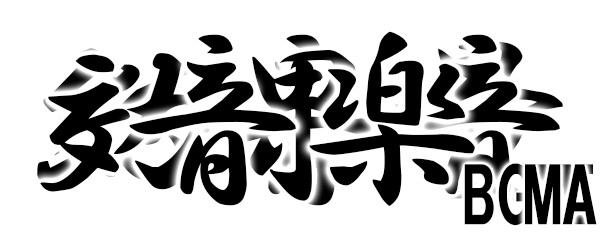
<style>
.page{position:relative;width:600px;height:240px;background:#ffffff}
.page>*{position:absolute;margin:0}
.t1{font:195.8px "HGSGyoshotai";letter-spacing:-0.1em;color:#000000}
.t2{font:75px "HGSoeiKakugothicUB";color:#000000}
</style>
<div class="page">
<p class="t1" style="left:40px;top:34px;width:520px;height:172px">効果音</p>
<p class="t1" style="left:129px;top:31px;width:346px;height:176px">音楽</p>
<p class="t2" style="left:464px;top:163px;width:108px;height:63px">BGM</p>
</div>
